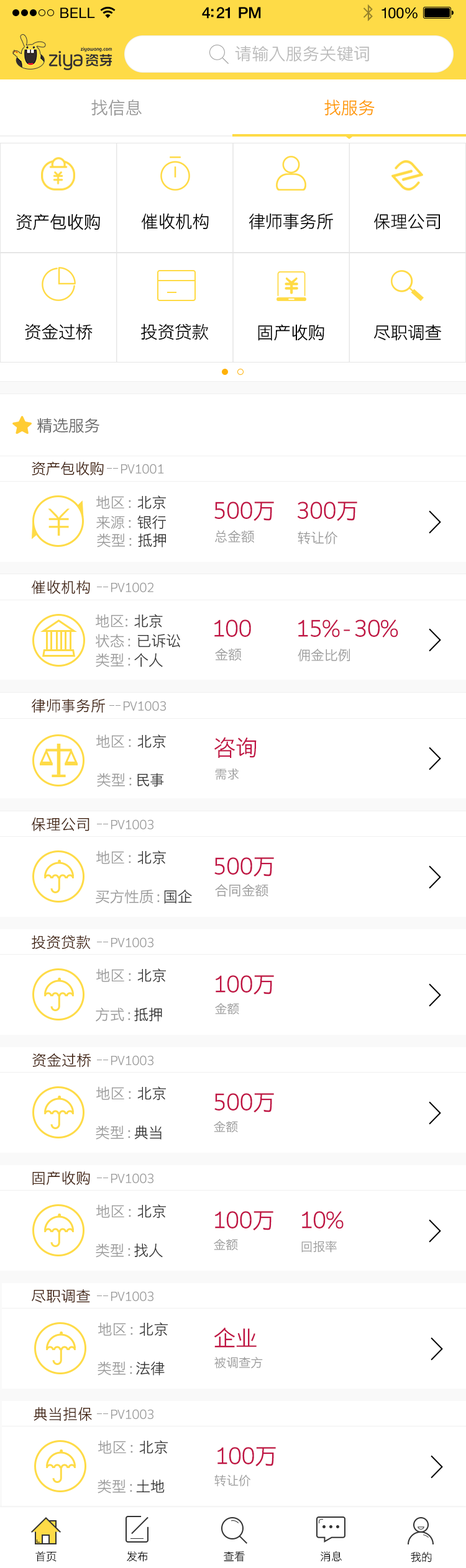
<style>
.page{position:relative;width:466px;height:1568px;background:#ffffff}
.page>*{position:absolute;margin:0}
.t1{font:14.3px "HelveticaNeue";letter-spacing:0.02em;color:#000000}
.t2{font:15.5px "HelveticaNeue-Medium";letter-spacing:-0.02em;color:#000000}
.t3{font:14.9px "HelveticaNeue";letter-spacing:-0.02em;color:#010101}
.t4{font:17px "STHeitiSC-Light";color:#bbbbbb}
.t5{font:17.4px "STHeitiSC-Light";letter-spacing:-0.02em;color:#999999}
.t6{font:17.4px "STHeitiSC-Light";letter-spacing:-0.02em;color:#ff9900}
.t7{font:17.4px "STHeitiSC-Light";letter-spacing:-0.02em;color:#000000}
.t8{font:16.1px "STHeitiSC-Light";letter-spacing:-0.02em;color:#666666}
.t9{font:14.9px "STHeitiSC-Light";letter-spacing:-0.02em;color:#41210f}
.t10{font:12.4px "STHeitiSC-Light";letter-spacing:-0.02em;color:#999999}
.t11{font:14.9px "STHeitiSC-Light";letter-spacing:-0.02em;color:#999999}
.t12{font:14.9px "STHeitiSC-Light";letter-spacing:-0.02em;color:#333333}
.t13{font:22.3px "STHeitiSC-Light";letter-spacing:-0.02em;color:#c01444}
.t14{font:13.7px "STHeitiSC-Light";letter-spacing:-0.02em;color:#999999}
.t15{font:14.9px "STHeitiSC-Light";color:#41210f}
.t16{font:11.2px "STHeitiSC-Light";letter-spacing:-0.02em;color:#000000}
</style>
<div class="page">
<p class="t1" style="left:60px;top:7px;width:35px;height:11px">BELL</p>
<p class="t2" style="left:202px;top:7px;width:59px;height:12px">4:21 PM</p>
<p class="t3" style="left:381px;top:7px;width:36px;height:12px">100%</p>
<p class="t4" style="left:235px;top:45px;width:134px;height:16px">请输入服务关键词</p>
<p class="t5" style="left:91px;top:99px;width:51px;height:17px">找信息</p>
<p class="t6" style="left:324px;top:99px;width:50px;height:17px">找服务</p>
<p class="t7" style="left:16px;top:214px;width:84px;height:16px">资产包收购</p>
<p class="t7" style="left:141px;top:213px;width:68px;height:17px">催收机构</p>
<p class="t7" style="left:248px;top:213px;width:85px;height:17px">律师事务所</p>
<p class="t7" style="left:374px;top:213px;width:65px;height:17px">保理公司</p>
<p class="t7" style="left:25px;top:323px;width:67px;height:17px">资金过桥</p>
<p class="t7" style="left:141px;top:323px;width:68px;height:17px">投资贷款</p>
<p class="t7" style="left:258px;top:324px;width:66px;height:17px">固产收购</p>
<p class="t7" style="left:373px;top:325px;width:68px;height:16px">尽职调查</p>
<p class="t8" style="left:37px;top:418px;width:62px;height:15px">精选服务</p>
<p class="t9" style="left:32px;top:461px;width:72px;height:14px">资产包收购</p>
<p class="t10" style="left:121px;top:464px;width:43px;height:10px">PV1001</p>
<p class="t11" style="left:96px;top:495px;width:70px;height:15px">地区 :  <span class="t12">北京</span></p>
<p class="t13" style="left:214px;top:502px;width:60px;height:19px">500万</p>
<p class="t13" style="left:297px;top:502px;width:60px;height:19px">300万</p>
<p class="t11" style="left:96px;top:515px;width:70px;height:14px">来源 :  <span class="t12">银行</span></p>
<p class="t11" style="left:97px;top:533px;width:69px;height:14px">类型 :  <span class="t12">抵押</span></p>
<p class="t14" style="left:215px;top:530px;width:39px;height:13px">总金额</p>
<p class="t14" style="left:297px;top:531px;width:40px;height:13px">转让价</p>
<p class="t15" style="left:31px;top:580px;width:59px;height:14px">催收机构</p>
<p class="t10" style="left:111px;top:582px;width:42px;height:10px">PV1002</p>
<p class="t11" style="left:96px;top:614px;width:67px;height:14px">地区:  <span class="t12">北京</span></p>
<p class="t13" style="left:214px;top:620px;width:37px;height:17px">100</p>
<p class="t13" style="left:298px;top:620px;width:100px;height:18px">15% - 30%</p>
<p class="t11" style="left:96px;top:634px;width:84px;height:14px">状态 :  <span class="t12">已诉讼</span></p>
<p class="t11" style="left:96px;top:653px;width:67px;height:14px">类型 : <span class="t12">个人</span></p>
<p class="t14" style="left:215px;top:648px;width:26px;height:13px">金额</p>
<p class="t14" style="left:297px;top:649px;width:52px;height:13px">佣金比例</p>
<p class="t15" style="left:32px;top:698px;width:73px;height:15px">律师事务所</p>
<p class="t10" style="left:124px;top:701px;width:42px;height:10px">PV1003</p>
<p class="t11" style="left:96px;top:734px;width:70px;height:15px">地区 :  <span class="t12">北京</span></p>
<p class="t13" style="left:214px;top:737px;width:42px;height:21px">咨询</p>
<p class="t11" style="left:97px;top:773px;width:67px;height:14px">类型 : <span class="t12">民事</span></p>
<p class="t10" style="left:215px;top:768px;width:23px;height:12px">需求</p>
<p class="t15" style="left:32px;top:817px;width:57px;height:14px">保理公司</p>
<p class="t10" style="left:111px;top:819px;width:42px;height:10px">PV1003</p>
<p class="t11" style="left:96px;top:850px;width:70px;height:15px">地区 :  <span class="t12">北京</span></p>
<p class="t13" style="left:214px;top:857px;width:60px;height:20px">500万</p>
<p class="t11" style="left:96px;top:890px;width:96px;height:14px">买方性质 : <span class="t12">国企</span></p>
<p class="t14" style="left:215px;top:884px;width:53px;height:13px">合同金额</p>
<p class="t15" style="left:32px;top:935px;width:59px;height:14px">投资贷款</p>
<p class="t10" style="left:111px;top:937px;width:42px;height:10px">PV1003</p>
<p class="t11" style="left:96px;top:968px;width:70px;height:15px">地区 :  <span class="t12">北京</span></p>
<p class="t13" style="left:215px;top:975px;width:59px;height:20px">100万</p>
<p class="t11" style="left:96px;top:1007px;width:66px;height:15px">方式 : <span class="t12">抵押</span></p>
<p class="t10" style="left:215px;top:1003px;width:24px;height:12px">金额</p>
<p class="t15" style="left:32px;top:1053px;width:59px;height:14px">资金过桥</p>
<p class="t10" style="left:111px;top:1055px;width:42px;height:10px">PV1003</p>
<p class="t11" style="left:96px;top:1086px;width:70px;height:15px">地区 :  <span class="t12">北京</span></p>
<p class="t13" style="left:214px;top:1093px;width:60px;height:20px">500万</p>
<p class="t10" style="left:214px;top:1120px;width:24px;height:13px">金额</p>
<p class="t11" style="left:96px;top:1125px;width:65px;height:15px">类型 : <span class="t12">典当</span></p>
<p class="t15" style="left:32px;top:1171px;width:58px;height:14px">固产收购</p>
<p class="t10" style="left:111px;top:1173px;width:42px;height:10px">PV1003</p>
<p class="t11" style="left:96px;top:1204px;width:70px;height:15px">地区 :  <span class="t12">北京</span></p>
<p class="t13" style="left:215px;top:1211px;width:58px;height:20px">100万</p>
<p class="t13" style="left:302px;top:1211px;width:41px;height:18px">10%</p>
<p class="t10" style="left:214px;top:1238px;width:24px;height:13px">金额</p>
<p class="t10" style="left:301px;top:1240px;width:35px;height:13px">回报率</p>
<p class="t11" style="left:96px;top:1243px;width:67px;height:15px">类型 : <span class="t12">找人</span></p>
<p class="t15" style="left:32px;top:1289px;width:58px;height:14px">尽职调查</p>
<p class="t10" style="left:111px;top:1291px;width:42px;height:10px">PV1003</p>
<p class="t11" style="left:98px;top:1322px;width:70px;height:14px">地区 :  <span class="t12">北京</span></p>
<p class="t13" style="left:214px;top:1327px;width:42px;height:21px">企业</p>
<p class="t11" style="left:97px;top:1361px;width:67px;height:15px">类型 : <span class="t12">法律</span></p>
<p class="t10" style="left:214px;top:1356px;width:49px;height:13px">被调查方</p>
<p class="t15" style="left:34px;top:1407px;width:58px;height:14px">典当担保</p>
<p class="t10" style="left:111px;top:1409px;width:42px;height:10px">PV1003</p>
<p class="t11" style="left:98px;top:1440px;width:70px;height:14px">地区 :  <span class="t12">北京</span></p>
<p class="t13" style="left:217px;top:1447px;width:59px;height:20px">100万</p>
<p class="t11" style="left:97px;top:1479px;width:67px;height:15px">类型 : <span class="t12">土地</span></p>
<p class="t10" style="left:214px;top:1474px;width:36px;height:13px">转让价</p>
<p class="t16" style="left:35px;top:1551px;width:21px;height:11px">首页</p>
<p class="t16" style="left:127px;top:1551px;width:21px;height:11px">发布</p>
<p class="t16" style="left:223px;top:1551px;width:22px;height:11px">查看</p>
<p class="t16" style="left:320px;top:1551px;width:21px;height:11px">消息</p>
<p class="t16" style="left:410px;top:1552px;width:21px;height:10px">我的</p>
</div>
